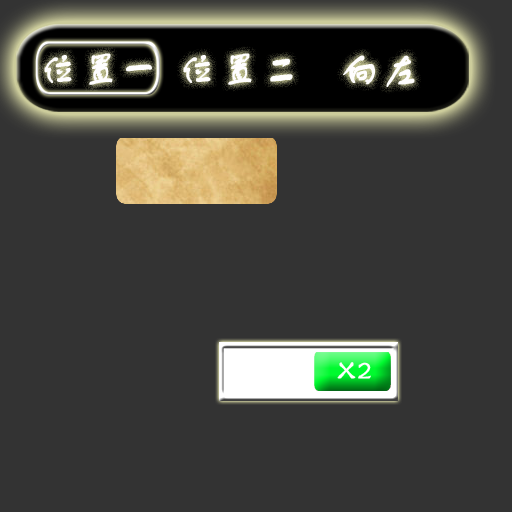
<style>
.page{position:relative;width:512px;height:512px;background:#333333}
.page>*{position:absolute;margin:0}
.t1{font:40.2px "FZSTK--GBK1-0";letter-spacing:0.05em;color:#fefdfd;font-weight:bold;scale:0.94 1}
.t2{font:27.8px "FZSTK--GBK1-0";letter-spacing:0.05em;color:#ffffff;font-weight:bold;scale:0.94 1}
</style>
<div class="page">
<p class="t1" style="left:44px;top:53px;width:108px;height:32px">位置一</p>
<p class="t1" style="left:183px;top:53px;width:110px;height:32px">位置二</p>
<p class="t1" style="left:343px;top:55px;width:72px;height:32px">向左</p>
<p class="t2" style="left:337px;top:362px;width:34px;height:17px">X2</p>
</div>
